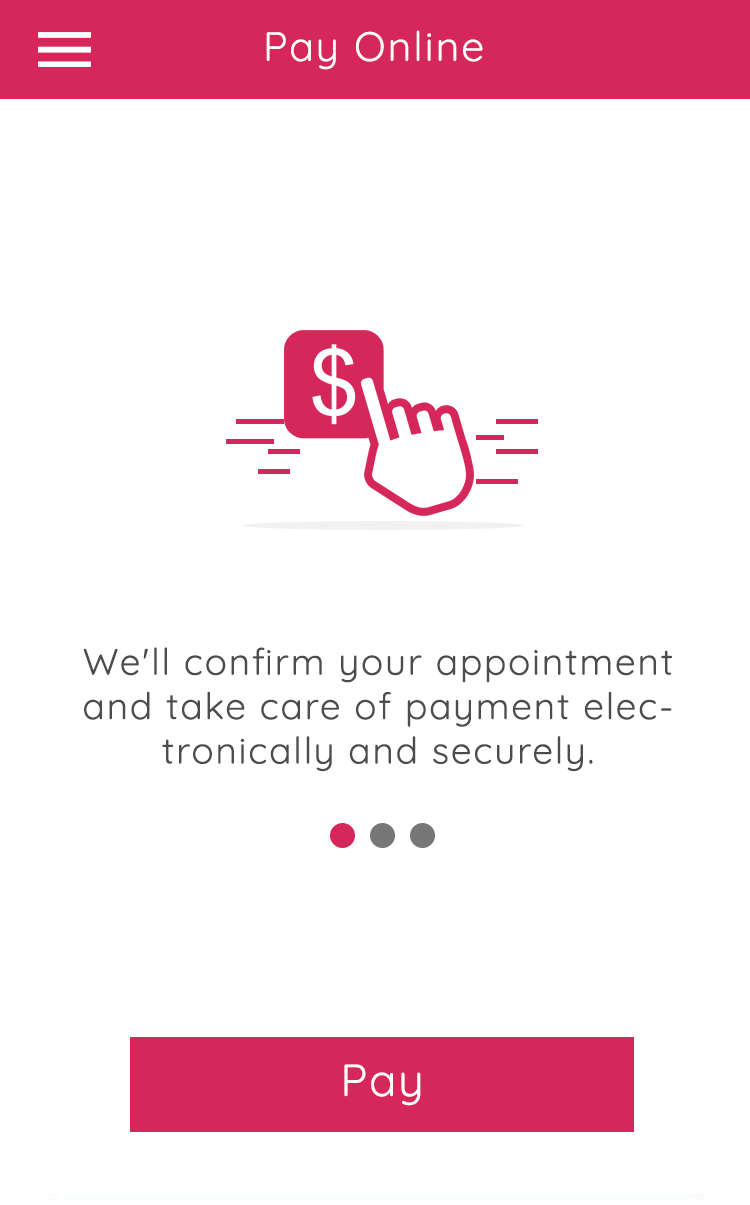
<style>
.page{position:relative;width:750px;height:1205px;background:#ffffff}
.page>*{position:absolute;margin:0}
.t1{font:41px "Quicksand-Regular";letter-spacing:0.05em;color:#ffffff}
.t2{font:37px "Quicksand-Regular";letter-spacing:0.05em;color:#4c4c4c}
.t3{font:45px "Quicksand-Regular";letter-spacing:0.05em;color:#ffffff}
</style>
<div class="page">
<p class="t1" style="left:266px;top:30px;width:217px;height:40px">Pay Online</p>
<p class="t2" style="left:83px;top:647px;width:590px;height:125px;text-align:center">We'll confirm your appointment and take care of payment electronically and securely.</p>
<p class="t3" style="left:344px;top:1064px;width:77px;height:42px">Pay</p>
</div>
